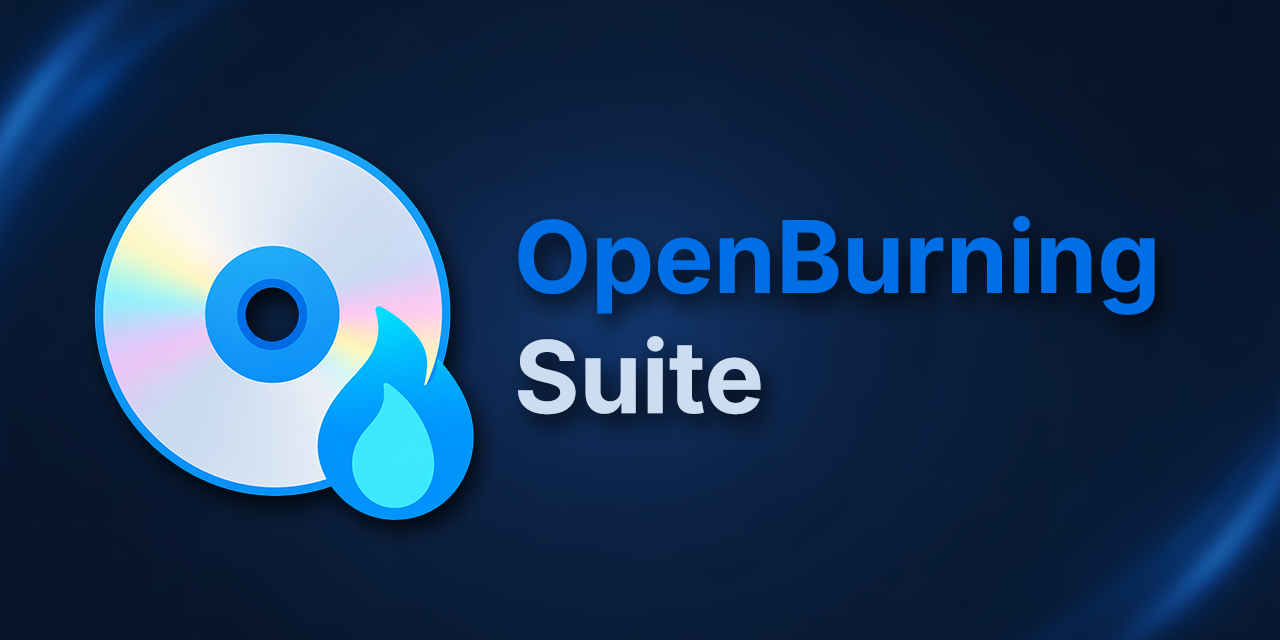
<style>
.page{position:relative;width:1280px;height:640px}
.page>*{position:absolute;margin:0}
.t1{font:100px "Inter-Bold";color:#006fe6}
.t2{font:100px "Inter-Bold";color:#ccdcf1}
</style>
<div class="page">
<p class="t1" style="left:518px;top:216px;width:637px;height:199px">OpenBurning<br><span class="t2">Suite</span></p>
</div>
